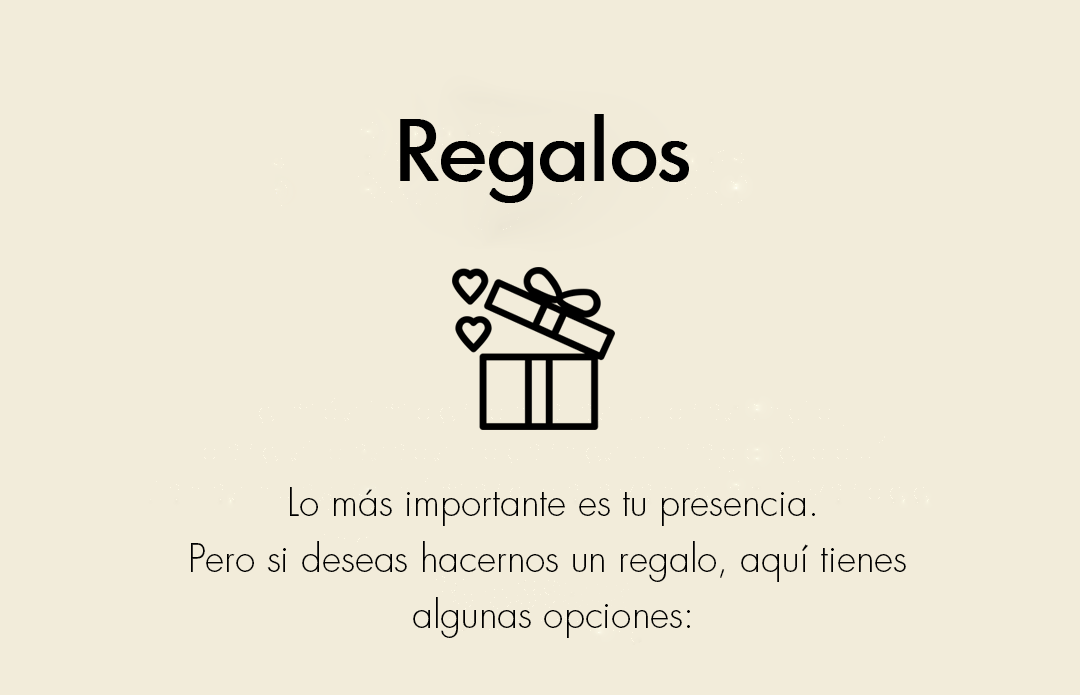
<style>
.page{position:relative;width:1080px;height:695px;background:#f2ecda}
.page>*{position:absolute;margin:0}
.t1{font:81.3px "GraphicusDT-Regular";color:#000000;font-weight:bold}
.t2{font:37.3px/55.9px "Futura-Light";color:#000000}
</style>
<div class="page">
<p class="t1" style="left:400px;top:114px;width:289px;height:89px">Regalos</p>
<p class="t2" style="left:191px;top:487px;width:715px;height:151px;text-align:center">Lo más importante es tu presencia.<br>Pero si deseas hacernos un regalo, aquí tienes <br>algunas opciones:</p>
</div>
